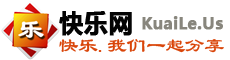
<style>
.page{position:relative;width:230px;height:60px;background:#ffffff}
.page>*{position:absolute;margin:0}
.t1{font:24px "MicrosoftYaHei";color:#040404;font-weight:bold}
.t2{font:16px "MicrosoftYaHei";color:#88867d;font-weight:bold}
.t3{font:20px "LiSu";letter-spacing:-0.025em;color:#d94509}
</style>
<div class="page">
<p class="t1" style="left:59px;top:11px;width:73px;height:25px">快乐网</p>
<p class="t2" style="left:142px;top:16px;width:81px;height:14px">KuaiLe.Us</p>
<p class="t3" style="left:59px;top:39px;width:165px;height:14px">快乐.我们一起分享</p>
</div>
